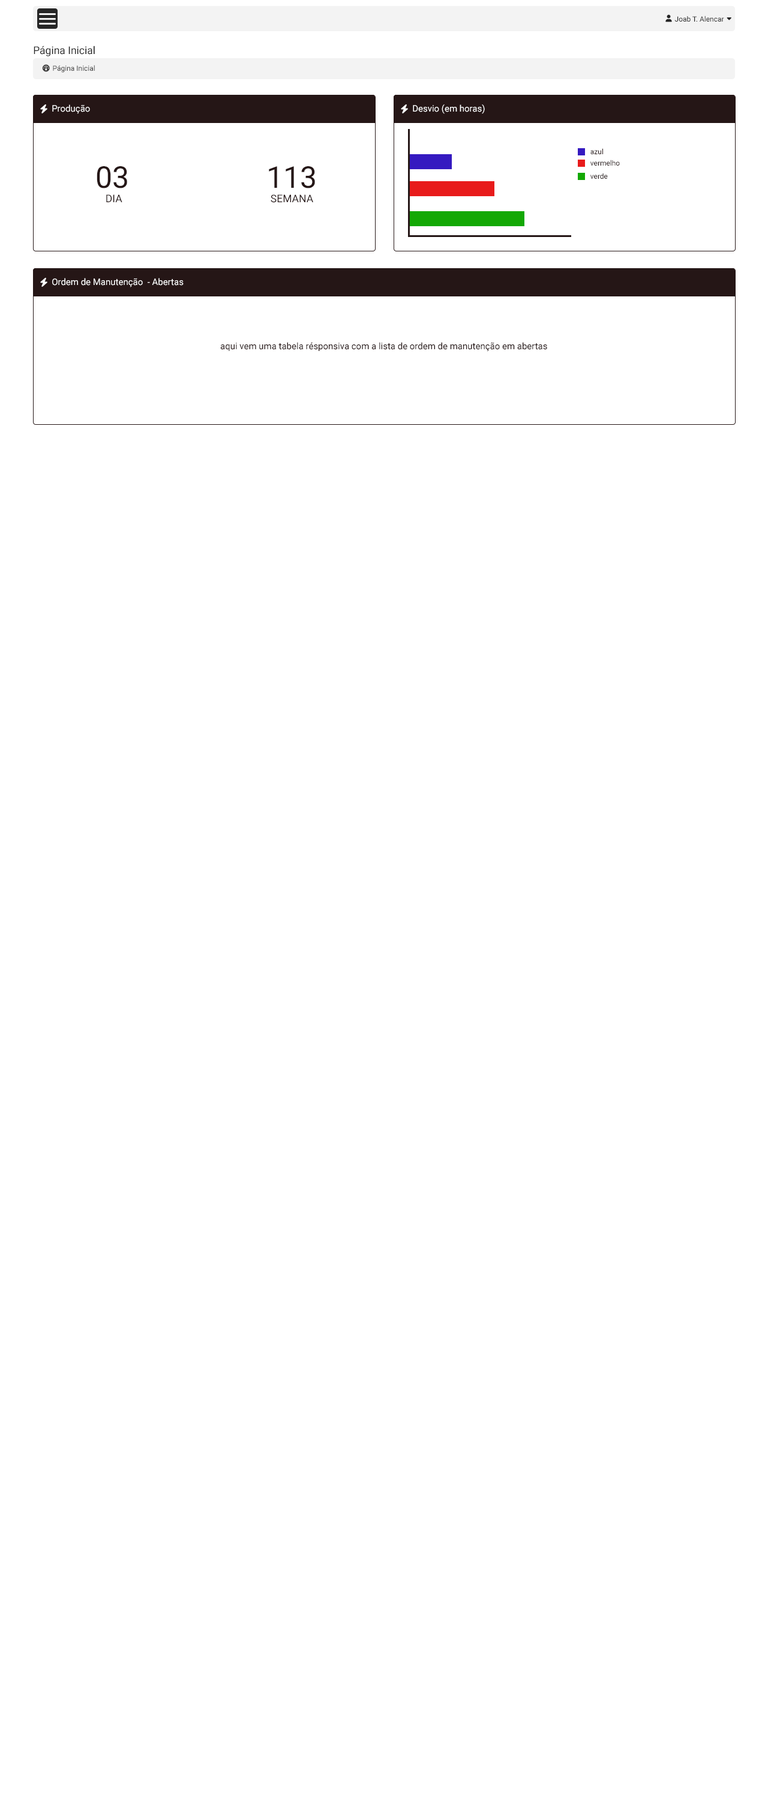
<style>
.page{position:relative;width:768px;height:1800px;background:#ffffff}
.page>*{position:absolute;margin:0}
.t1{font:7.2px "Roboto-Regular";color:#242424}
.t2{font:10.5px "Roboto-Regular";color:#242424}
.t3{font:7.2px "Roboto-Regular";color:#3f3e3e}
.t4{font:9px "Roboto-Regular";color:#ffffff}
.t5{font:7.2px "Roboto-Regular";color:#251616}
.t6{font:30px "Roboto-Regular";color:#251616}
.t7{font:10.5px "Roboto-Regular";color:#251616}
.t8{font:9px "Roboto-Regular";color:#251616}
</style>
<div class="page">
<p class="t1" style="left:674px;top:16px;width:50px;height:6px">Joab T. Alencar</p>
<p class="t2" style="left:34px;top:46px;width:61px;height:10px">Página Inicial</p>
<p class="t3" style="left:53px;top:65px;width:42px;height:8px">Página Inicial</p>
<p class="t4" style="left:52px;top:104px;width:38px;height:10px">Produção</p>
<p class="t4" style="left:413px;top:104px;width:72px;height:10px">Desvio (em horas)</p>
<p class="t5" style="left:590px;top:148px;width:13px;height:6px">azul</p>
<p class="t5" style="left:590px;top:160px;width:30px;height:6px">vermelho</p>
<p class="t6" style="left:97px;top:166px;width:30px;height:22px">03</p>
<p class="t6" style="left:269px;top:166px;width:46px;height:22px">113</p>
<p class="t5" style="left:590px;top:173px;width:18px;height:6px">verde</p>
<p class="t7" style="left:106px;top:194px;width:16px;height:8px">DIA</p>
<p class="t7" style="left:271px;top:194px;width:42px;height:9px">SEMANA</p>
<p class="t4" style="left:52px;top:278px;width:132px;height:9px">Ordem de Manutenção  - Abertas</p>
<p class="t8" style="left:220px;top:342px;width:327px;height:10px">aqui vem uma tabela résponsiva com a lista de ordem de manutenção em abertas</p>
</div>
